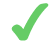
<style>
.page{position:relative;width:50px;height:50px;background:#ffffff}
.page>*{position:absolute;margin:0}
.t1{font:48px "ArialUnicodeMS";color:#66cc66}
</style>
<div class="page">
<p class="t1" style="left:11px;top:3px;width:38px;height:38px">✔</p>
</div>
